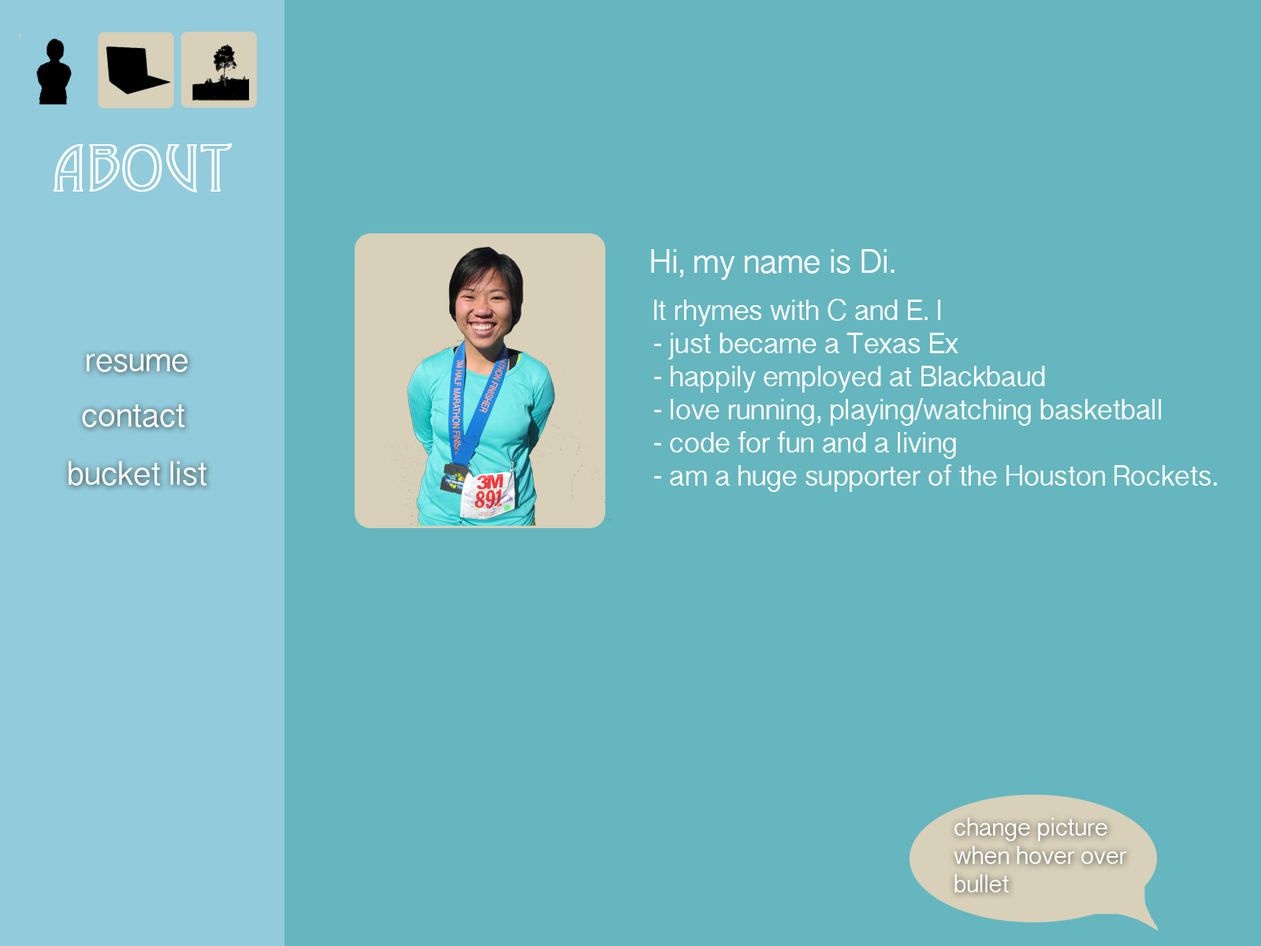
<style>
.page{position:relative;width:1261px;height:946px;background:#65b6bf}
.page>*{position:absolute;margin:0}
.t1{font:63px "Desdemona";color:#ffffff;font-weight:bold}
.t2{font:31.5px "KannadaSangamMN";color:#ffffff}
.t3{font:27.6px "KannadaSangamMN";color:#ffffff}
.t4{font:23.6px "KannadaSangamMN";color:#ffffff}
</style>
<div class="page">
<p class="t1" style="left:53px;top:143px;width:179px;height:49px">about</p>
<p class="t2" style="left:651px;top:249px;width:243px;height:31px">Hi, my name is Di.</p>
<p class="t3" style="left:654px;top:299px;width:563px;height:193px">It rhymes with C and E. I <br>- just became a Texas Ex<br>- happily employed at Blackbaud<br>- love running, playing/watching basketball<br>- code for fun and a living<br>- am a huge supporter of the Houston Rockets.</p>
<p class="t2" style="left:87px;top:354px;width:101px;height:18px">resume</p>
<p class="t2" style="left:82px;top:404px;width:102px;height:23px">contact</p>
<p class="t2" style="left:69px;top:461px;width:137px;height:24px">bucket list</p>
<p class="t4" style="left:954px;top:817px;width:173px;height:75px">change picture<br>when hover over<br>bullet</p>
</div>
